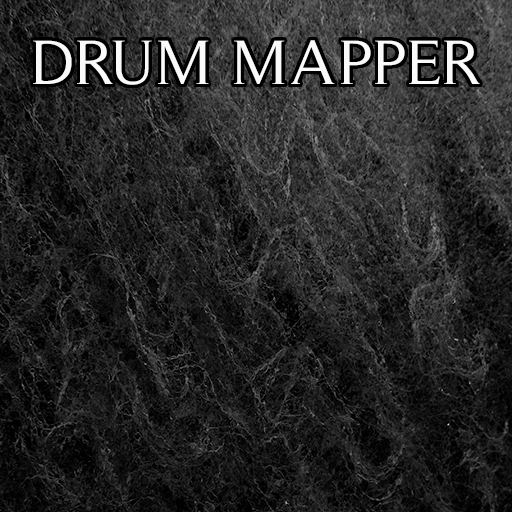
<style>
.page{position:relative;width:512px;height:512px}
.page>*{position:absolute;margin:0}
.t1{font:64px "Timeless-Normal";color:#fafafa}
</style>
<div class="page">
<p class="t1" style="left:33px;top:40px;width:447px;height:45px">DRUM MAPPER</p>
</div>
